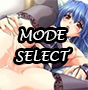
<style>
.page{position:relative;width:88px;height:90px}
.page>*{position:absolute;margin:0}
.t1{font:13.9px "LucidaHandwriting-Italic";color:#ffffff}
</style>
<div class="page">
<p class="t1" style="left:20px;top:29px;width:46px;height:12px">MODE</p>
<p class="t1" style="left:16px;top:49px;width:55px;height:13px">SELECT</p>
</div>
